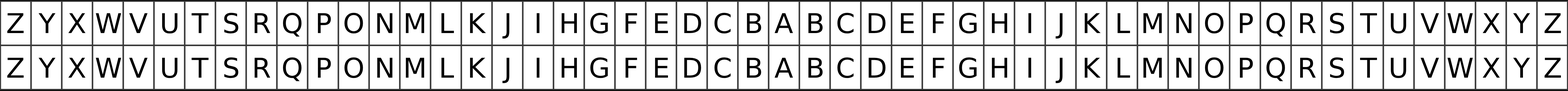
<style>
.page{position:relative;width:1568px;height:91px;background:#ffffff}
.page>*{position:absolute;margin:0}
.t1{font:27.4px "DejaVuSans";color:#000000}
</style>
<div class="page">
<p class="t1" style="left:7px;top:13px;width:17px;height:20px">Z</p>
<p class="t1" style="left:38px;top:13px;width:18px;height:20px">Y</p>
<p class="t1" style="left:68px;top:13px;width:18px;height:20px">X</p>
<p class="t1" style="left:96px;top:13px;width:25px;height:20px">W</p>
<p class="t1" style="left:129px;top:13px;width:19px;height:20px">V</p>
<p class="t1" style="left:162px;top:13px;width:16px;height:21px">U</p>
<p class="t1" style="left:191px;top:13px;width:18px;height:20px">T</p>
<p class="t1" style="left:224px;top:13px;width:15px;height:21px">S</p>
<p class="t1" style="left:254px;top:13px;width:16px;height:20px">R</p>
<p class="t1" style="left:283px;top:13px;width:19px;height:24px">Q</p>
<p class="t1" style="left:318px;top:13px;width:13px;height:20px">P</p>
<p class="t1" style="left:344px;top:13px;width:19px;height:21px">O</p>
<p class="t1" style="left:377px;top:13px;width:16px;height:20px">N</p>
<p class="t1" style="left:406px;top:13px;width:18px;height:20px">M</p>
<p class="t1" style="left:441px;top:13px;width:13px;height:20px">L</p>
<p class="t1" style="left:470px;top:13px;width:16px;height:20px">K</p>
<p class="t1" style="left:502px;top:13px;width:7px;height:26px">J</p>
<p class="t1" style="left:536px;top:13px;width:4px;height:20px">I</p>
<p class="t1" style="left:561px;top:13px;width:16px;height:20px">H</p>
<p class="t1" style="left:590px;top:13px;width:18px;height:21px">G</p>
<p class="t1" style="left:625px;top:13px;width:12px;height:20px">F</p>
<p class="t1" style="left:655px;top:13px;width:13px;height:20px">E</p>
<p class="t1" style="left:684px;top:13px;width:17px;height:20px">D</p>
<p class="t1" style="left:714px;top:13px;width:17px;height:21px">C</p>
<p class="t1" style="left:747px;top:13px;width:14px;height:20px">B</p>
<p class="t1" style="left:774px;top:13px;width:19px;height:20px">A</p>
<p class="t1" style="left:808px;top:13px;width:15px;height:20px">B</p>
<p class="t1" style="left:837px;top:13px;width:17px;height:21px">C</p>
<p class="t1" style="left:868px;top:13px;width:17px;height:20px">D</p>
<p class="t1" style="left:901px;top:13px;width:13px;height:20px">E</p>
<p class="t1" style="left:933px;top:13px;width:12px;height:20px">F</p>
<p class="t1" style="left:959px;top:13px;width:18px;height:21px">G</p>
<p class="t1" style="left:992px;top:13px;width:15px;height:20px">H</p>
<p class="t1" style="left:1028px;top:13px;width:3px;height:20px">I</p>
<p class="t1" style="left:1056px;top:13px;width:7px;height:26px">J</p>
<p class="t1" style="left:1084px;top:13px;width:17px;height:20px">K</p>
<p class="t1" style="left:1117px;top:13px;width:13px;height:20px">L</p>
<p class="t1" style="left:1143px;top:13px;width:19px;height:20px">M</p>
<p class="t1" style="left:1176px;top:13px;width:16px;height:20px">N</p>
<p class="t1" style="left:1205px;top:13px;width:19px;height:21px">O</p>
<p class="t1" style="left:1240px;top:13px;width:13px;height:20px">P</p>
<p class="t1" style="left:1266px;top:13px;width:19px;height:24px">Q</p>
<p class="t1" style="left:1300px;top:13px;width:16px;height:20px">R</p>
<p class="t1" style="left:1330px;top:13px;width:14px;height:21px">S</p>
<p class="t1" style="left:1360px;top:13px;width:17px;height:20px">T</p>
<p class="t1" style="left:1391px;top:13px;width:15px;height:21px">U</p>
<p class="t1" style="left:1420px;top:13px;width:19px;height:20px">V</p>
<p class="t1" style="left:1447px;top:13px;width:26px;height:20px">W</p>
<p class="t1" style="left:1482px;top:13px;width:18px;height:20px">X</p>
<p class="t1" style="left:1513px;top:13px;width:17px;height:20px">Y</p>
<p class="t1" style="left:1545px;top:13px;width:16px;height:20px">Z</p>
<p class="t1" style="left:7px;top:58px;width:17px;height:20px">Z</p>
<p class="t1" style="left:38px;top:58px;width:18px;height:20px">Y</p>
<p class="t1" style="left:68px;top:58px;width:18px;height:20px">X</p>
<p class="t1" style="left:96px;top:58px;width:25px;height:20px">W</p>
<p class="t1" style="left:129px;top:58px;width:19px;height:20px">V</p>
<p class="t1" style="left:162px;top:58px;width:16px;height:21px">U</p>
<p class="t1" style="left:191px;top:58px;width:18px;height:20px">T</p>
<p class="t1" style="left:224px;top:58px;width:15px;height:21px">S</p>
<p class="t1" style="left:254px;top:58px;width:16px;height:20px">R</p>
<p class="t1" style="left:283px;top:58px;width:19px;height:24px">Q</p>
<p class="t1" style="left:318px;top:58px;width:13px;height:20px">P</p>
<p class="t1" style="left:344px;top:58px;width:19px;height:21px">O</p>
<p class="t1" style="left:377px;top:58px;width:16px;height:20px">N</p>
<p class="t1" style="left:406px;top:58px;width:18px;height:20px">M</p>
<p class="t1" style="left:441px;top:58px;width:13px;height:20px">L</p>
<p class="t1" style="left:470px;top:58px;width:16px;height:20px">K</p>
<p class="t1" style="left:502px;top:58px;width:7px;height:26px">J</p>
<p class="t1" style="left:536px;top:58px;width:4px;height:20px">I</p>
<p class="t1" style="left:561px;top:58px;width:16px;height:20px">H</p>
<p class="t1" style="left:590px;top:58px;width:18px;height:21px">G</p>
<p class="t1" style="left:625px;top:58px;width:12px;height:20px">F</p>
<p class="t1" style="left:655px;top:58px;width:13px;height:20px">E</p>
<p class="t1" style="left:684px;top:58px;width:17px;height:20px">D</p>
<p class="t1" style="left:714px;top:58px;width:17px;height:21px">C</p>
<p class="t1" style="left:747px;top:58px;width:14px;height:20px">B</p>
<p class="t1" style="left:774px;top:58px;width:19px;height:20px">A</p>
<p class="t1" style="left:808px;top:58px;width:15px;height:20px">B</p>
<p class="t1" style="left:837px;top:58px;width:17px;height:21px">C</p>
<p class="t1" style="left:868px;top:58px;width:17px;height:20px">D</p>
<p class="t1" style="left:901px;top:58px;width:13px;height:20px">E</p>
<p class="t1" style="left:933px;top:58px;width:12px;height:20px">F</p>
<p class="t1" style="left:959px;top:58px;width:18px;height:21px">G</p>
<p class="t1" style="left:992px;top:58px;width:15px;height:20px">H</p>
<p class="t1" style="left:1028px;top:58px;width:3px;height:20px">I</p>
<p class="t1" style="left:1056px;top:58px;width:7px;height:26px">J</p>
<p class="t1" style="left:1084px;top:58px;width:17px;height:20px">K</p>
<p class="t1" style="left:1117px;top:58px;width:13px;height:20px">L</p>
<p class="t1" style="left:1143px;top:58px;width:19px;height:20px">M</p>
<p class="t1" style="left:1176px;top:58px;width:16px;height:20px">N</p>
<p class="t1" style="left:1205px;top:58px;width:19px;height:21px">O</p>
<p class="t1" style="left:1240px;top:58px;width:13px;height:20px">P</p>
<p class="t1" style="left:1266px;top:58px;width:19px;height:24px">Q</p>
<p class="t1" style="left:1300px;top:58px;width:16px;height:20px">R</p>
<p class="t1" style="left:1330px;top:58px;width:14px;height:21px">S</p>
<p class="t1" style="left:1360px;top:58px;width:17px;height:20px">T</p>
<p class="t1" style="left:1391px;top:58px;width:15px;height:21px">U</p>
<p class="t1" style="left:1420px;top:58px;width:19px;height:20px">V</p>
<p class="t1" style="left:1447px;top:58px;width:26px;height:20px">W</p>
<p class="t1" style="left:1482px;top:58px;width:18px;height:20px">X</p>
<p class="t1" style="left:1513px;top:58px;width:17px;height:20px">Y</p>
<p class="t1" style="left:1545px;top:58px;width:16px;height:20px">Z</p>
</div>
